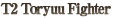
<style>
.page{position:relative;width:115px;height:18px;background:#ffffff}
.page>*{position:absolute;margin:0}
.t1{font:15px "RyuminPro-ExBold";letter-spacing:-0.08em;color:#4a3f32;font-weight:bold;scale:0.9 1}
</style>
<div class="page">
<p class="t1" style="left:0px;top:3px;width:111px;height:14px">T2 Toryuu Fighter</p>
</div>
